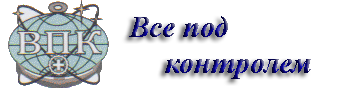
<style>
.page{position:relative;width:341px;height:90px;background:#ffffff}
.page>*{position:absolute;margin:0}
.t1{font:30px "TimesNewRomanPS-BoldItalicMT"}
</style>
<div class="page">
<p class="t1" style="left:129px;top:16px;width:182px;height:63px">Все под <br> контролем</p>
</div>
